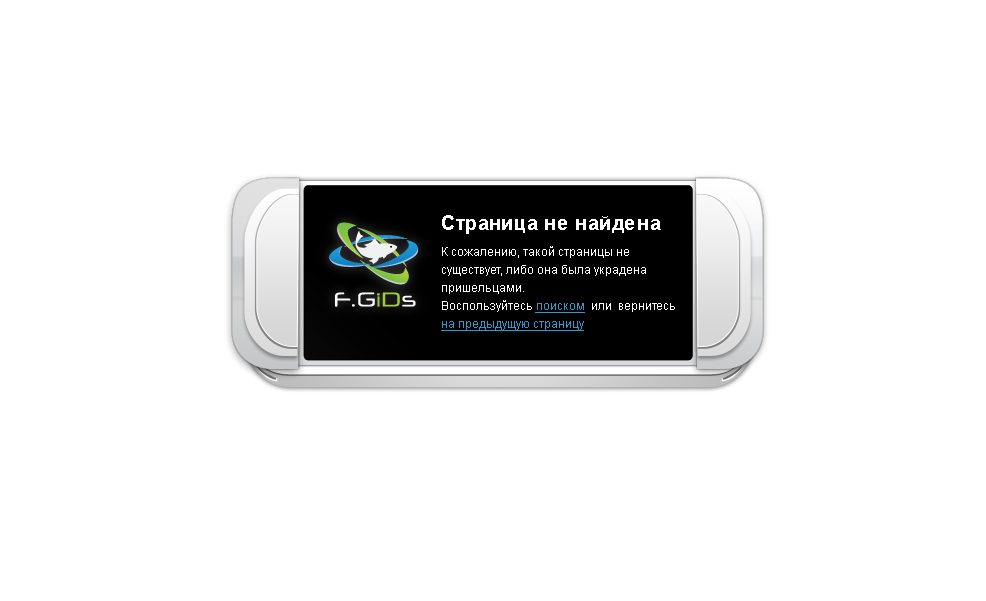
<style>
.page{position:relative;width:986px;height:601px;background:#ffffff}
.page>*{position:absolute;margin:0}
.t1{font:20px "Arial-BoldMT";color:#ffffff}
.t2{font:12px/18px "ArialMT";color:#ffffff}
.t3{font:12px/18px "ArialMT";color:#3399cc;text-decoration:underline}
</style>
<div class="page">
<p class="t1" style="left:442px;top:215px;width:219px;height:19px">Страница не найдена</p>
<p class="t2" style="left:441px;top:246px;width:234px;height:85px">К сожалению, такой страницы не существует, либо она была украдена пришельцами.<br>Воспользуйтесь <span class="t3">поиском </span> или  вернитесь <span class="t3">на предыдущую страницу</span></p>
</div>
